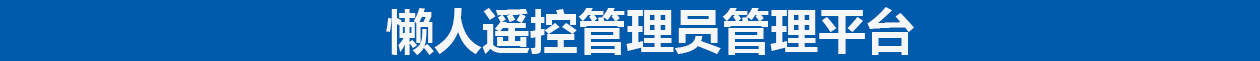
<style>
.page{position:relative;width:1260px;height:61px;background:#005bac}
.page>*{position:absolute;margin:0}
.t1{font:48px "MicrosoftYaHei-Bold";color:#f6f7f8}
</style>
<div class="page">
<p class="t1" style="left:386px;top:7px;width:528px;height:48px">懒人遥控管理员管理平台</p>
</div>
